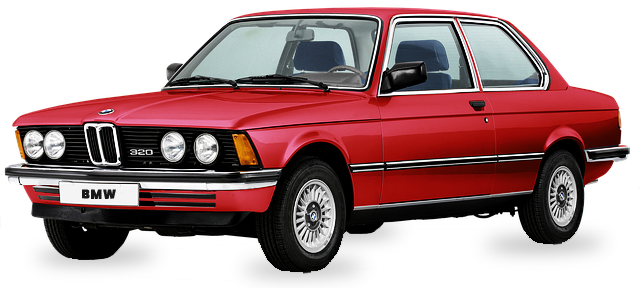
<style>
.page{position:relative;width:640px;height:288px;background:#ffffff}
.page>*{position:absolute;margin:0}
.t1{font:12px "Poppins-Black";letter-spacing:0.075em;color:#101010}
</style>
<div class="page">
<p class="t1" style="left:82px;top:189px;width:34px;height:10px;opacity:0.96">BMW</p>
</div>
